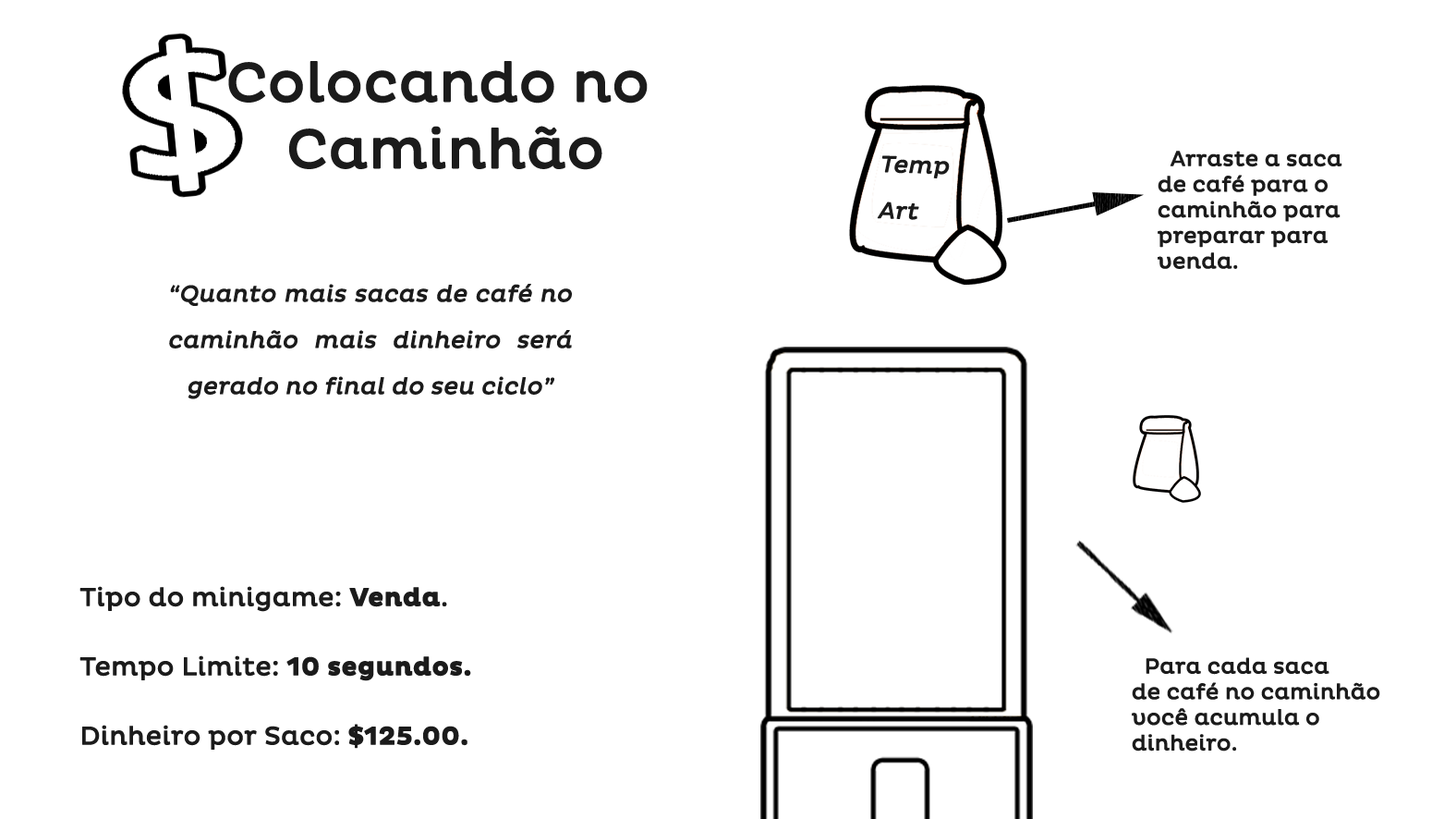
<style>
.page{position:relative;width:1456px;height:819px;background:#ffffff}
.page>*{position:absolute;margin:0}
.t1{font:55.4px "PlutoRegular";color:#1b1b1b;font-weight:bold}
.t2{font:23.1px/46.2px "PlutoRegular";color:#1b1b1b;font-weight:bold;font-style:italic}
.t3{font:21.3px "PlutoRegular";color:#1b1b1b;font-weight:bold}
.t4{font:25.5px/69.3px "PlutoRegular";color:#1b1b1b;font-weight:bold}
.t5{font:25.5px/69.3px "PlutoBold";color:#1b1b1b;font-weight:bold}
</style>
<div class="page">
<p class="t1" style="left:228px;top:61px;width:420px;height:109px;text-align:center">Colocando no <br>Caminhão</p>
<p class="t2" style="left:877px;top:155px;width:73px;height:65px;text-align:justify;rotate:2deg">Temp<br>Art</p>
<p class="t3" style="left:1158px;top:151px;width:185px;height:118px">Arraste a saca<br>de café para o <br>caminhão para<br>preparar para<br>venda.</p>
<p class="t2" style="left:169px;top:284px;width:403px;height:115px;text-align:justify">“Quanto mais sacas de café no caminhão mais dinheiro será gerado no final do seu ciclo”</p>
<p class="t4" style="left:79px;top:586px;width:392px;height:163px">Tipo do minigame: <span class="t5">Venda</span>.<br>Tempo Limite: <span class="t5">10 segundos.<br></span>Dinheiro por Saco: <span class="t5">$125.00.</span></p>
<p class="t3" style="left:1132px;top:657px;width:249px;height:94px">Para cada saca<br>de café no caminhão<br>você acumula o <br>dinheiro.</p>
</div>
